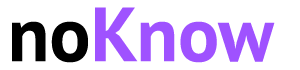
<style>
.page{position:relative;width:300px;height:70px;background:#ffffff}
.page>*{position:absolute;margin:0}
.t1{font:76.5px "PTSans-Bold";color:#9f52ff}
.t2{font:76.5px "PTSans-Bold";color:#000000}
</style>
<div class="page">
<p class="t1" style="left:12px;top:7px;width:263px;height:56px"><span class="t2">no</span>Know</p>
</div>
